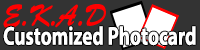
<style>
.page{position:relative;width:200px;height:50px;background:#333333}
.page>*{position:absolute;margin:0}
.t1{font:30.6px "BrushScriptStd";color:#ff0000;scale:0.82 1}
.t2{font:26px "MyriadPro-Bold";color:#ffffff;scale:0.74 1}
</style>
<div class="page">
<p class="t1" style="left:3px;top:4px;width:103px;height:25px">E.K.A.D</p>
<p class="t2" style="left:3px;top:26px;width:193px;height:20px">Customized Photocard</p>
</div>
